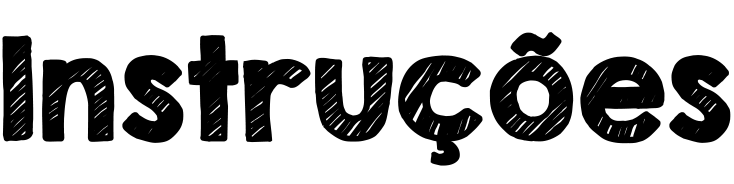
<style>
.page{position:relative;width:734px;height:184px;background:#ffffff}
.page>*{position:absolute;margin:0}
.t1{font:125px "KGSecondChancesSketch";color:#000000;font-weight:bold}
</style>
<div class="page">
<p class="t1" style="left:2px;top:32px;width:729px;height:134px">Instruções</p>
</div>
